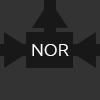
<style>
.page{position:relative;width:100px;height:100px;background:#333333}
.page>*{position:absolute;margin:0}
.t1{font:18px "Ubuntu-Light";color:#ffffff}
</style>
<div class="page">
<p class="t1" style="left:32px;top:44px;width:37px;height:12px">NOR</p>
</div>
